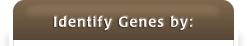
<style>
.page{position:relative;width:247px;height:46px;background:#ffffff}
.page>*{position:absolute;margin:0}
.t1{font:14px "LaudatioC";letter-spacing:0.1em;color:#ffffff}
</style>
<div class="page">
<p class="t1" style="left:54px;top:16px;width:138px;height:15px">Identify Genes by:</p>
</div>
